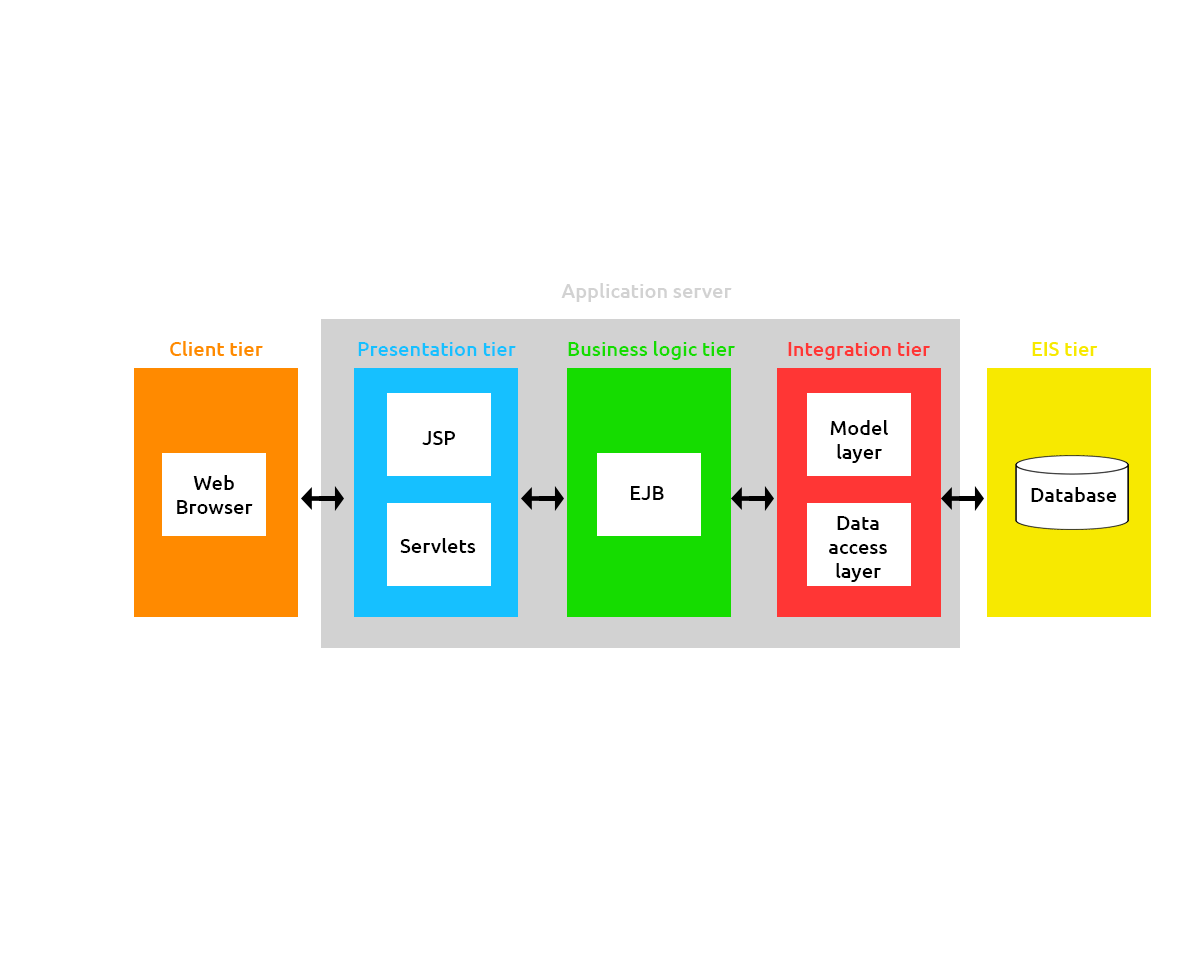
<style>
.page{position:relative;width:1200px;height:980px;background:#ffffff}
.page>*{position:absolute;margin:0}
.t1{font:20px "Ubuntu-Medium";color:#d2d2d2}
.t2{font:20px "Ubuntu-Medium";color:#ff8a00}
.t3{font:20px "Ubuntu-Medium";color:#16c0ff}
.t4{font:20px "Ubuntu-Medium";color:#15dc00}
.t5{font:20px "Ubuntu-Medium";color:#ff3635}
.t6{font:20px "Ubuntu-Medium";color:#f7e900}
.t7{font:20px "Ubuntu-Medium";color:#000000}
</style>
<div class="page">
<p class="t1" style="left:561px;top:283px;width:171px;height:19px">Application server</p>
<p class="t2" style="left:170px;top:341px;width:93px;height:15px">Client tier</p>
<p class="t3" style="left:358px;top:342px;width:158px;height:14px">Presentation tier</p>
<p class="t4" style="left:568px;top:341px;width:167px;height:19px">Business logic tier</p>
<p class="t5" style="left:788px;top:342px;width:142px;height:18px">Integration tier</p>
<p class="t6" style="left:1032px;top:342px;width:66px;height:14px">EIS tier</p>
<p class="t7" style="left:830px;top:420px;width:58px;height:43px;text-align:center">Model<br>layer</p>
<p class="t7" style="left:422px;top:431px;width:33px;height:14px">JSP</p>
<p class="t7" style="left:177px;top:475px;width:76px;height:39px;text-align:center">Web<br>Browser</p>
<p class="t7" style="left:631px;top:486px;width:33px;height:14px">EJB</p>
<p class="t7" style="left:1031px;top:487px;width:86px;height:15px">Database</p>
<p class="t7" style="left:829px;top:516px;width:58px;height:66px;text-align:center">Data<br>access<br>layer</p>
<p class="t7" style="left:400px;top:538px;width:76px;height:15px">Servlets</p>
</div>
